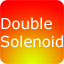
<style>
.page{position:relative;width:64px;height:64px}
.page>*{position:absolute;margin:0}
.t1{font:14.9px "Verdana";color:#ffffff}
</style>
<div class="page">
<p class="t1" style="left:1px;top:17px;width:62px;height:31px">Double<br>Solenoid</p>
</div>
